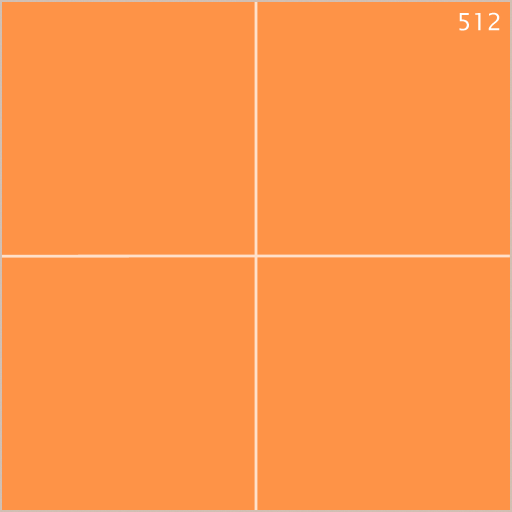
<style>
.page{position:relative;width:512px;height:512px;background:#fe9347}
.page>*{position:absolute;margin:0}
.t1{font:24px "LucidaSans";color:#fefefe;text-transform:uppercase}
</style>
<div class="page">
<p class="t1" style="left:459px;top:12px;width:41px;height:19px">512</p>
</div>
